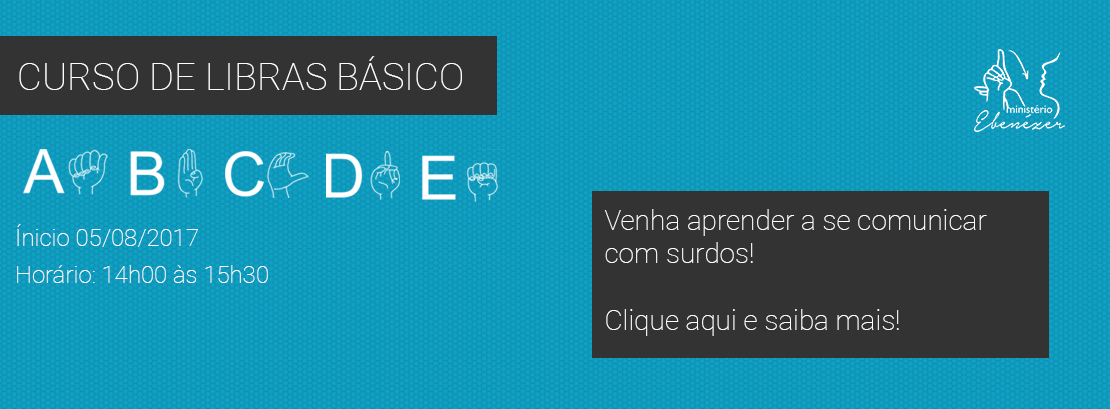
<style>
.page{position:relative;width:1110px;height:409px;background:#333333}
.page>*{position:absolute;margin:0}
.t1{font:38px "Roboto-Thin";color:#ffffff}
.t2{font:28px "Roboto-Thin";color:#ffffff}
.t3{font:24px "Roboto-Thin";color:#ffffff}
</style>
<div class="page">
<p class="t1" style="left:19px;top:56px;width:443px;height:34px">CURSO DE LIBRAS BÁSICO</p>
<p class="t2" style="left:604px;top:209px;width:383px;height:127px">Venha aprender a se comunicar com surdos!<br><br>Clique aqui e saiba mais!</p>
<p class="t3" style="left:17px;top:224px;width:181px;height:23px">Ínicio 05/08/2017</p>
<p class="t3" style="left:17px;top:265px;width:251px;height:18px">Horário: 14h00 às 15h30</p>
</div>
